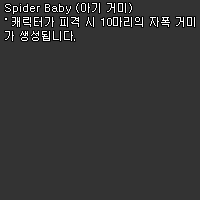
<style>
.page{position:relative;width:200px;height:200px;background:#333333}
.page>*{position:absolute;margin:0}
.t1{font:11px/14px "Dotum";color:#ffffff}
</style>
<div class="page">
<p class="t1" style="left:5px;top:3px;width:190px;height:38px">Spider Baby (아기 거미)<br>˚ 캐릭터가 피격 시 10마리의 자폭 거미<br>가 생성됩니다.</p>
</div>
